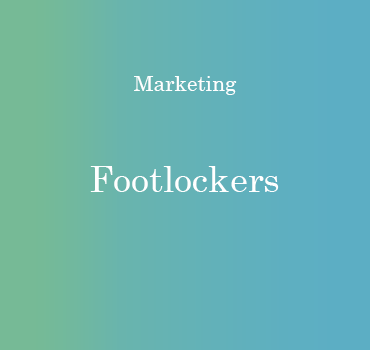
<style>
.page{position:relative;width:370px;height:350px}
.page>*{position:absolute;margin:0}
.t1{font:21px "Century";color:#ffffff}
.t2{font:36px "Century";color:#ffffff}
</style>
<div class="page">
<p class="t1" style="left:134px;top:76px;width:103px;height:19px">Marketing</p>
<p class="t2" style="left:90px;top:166px;width:189px;height:26px">Footlockers</p>
</div>
